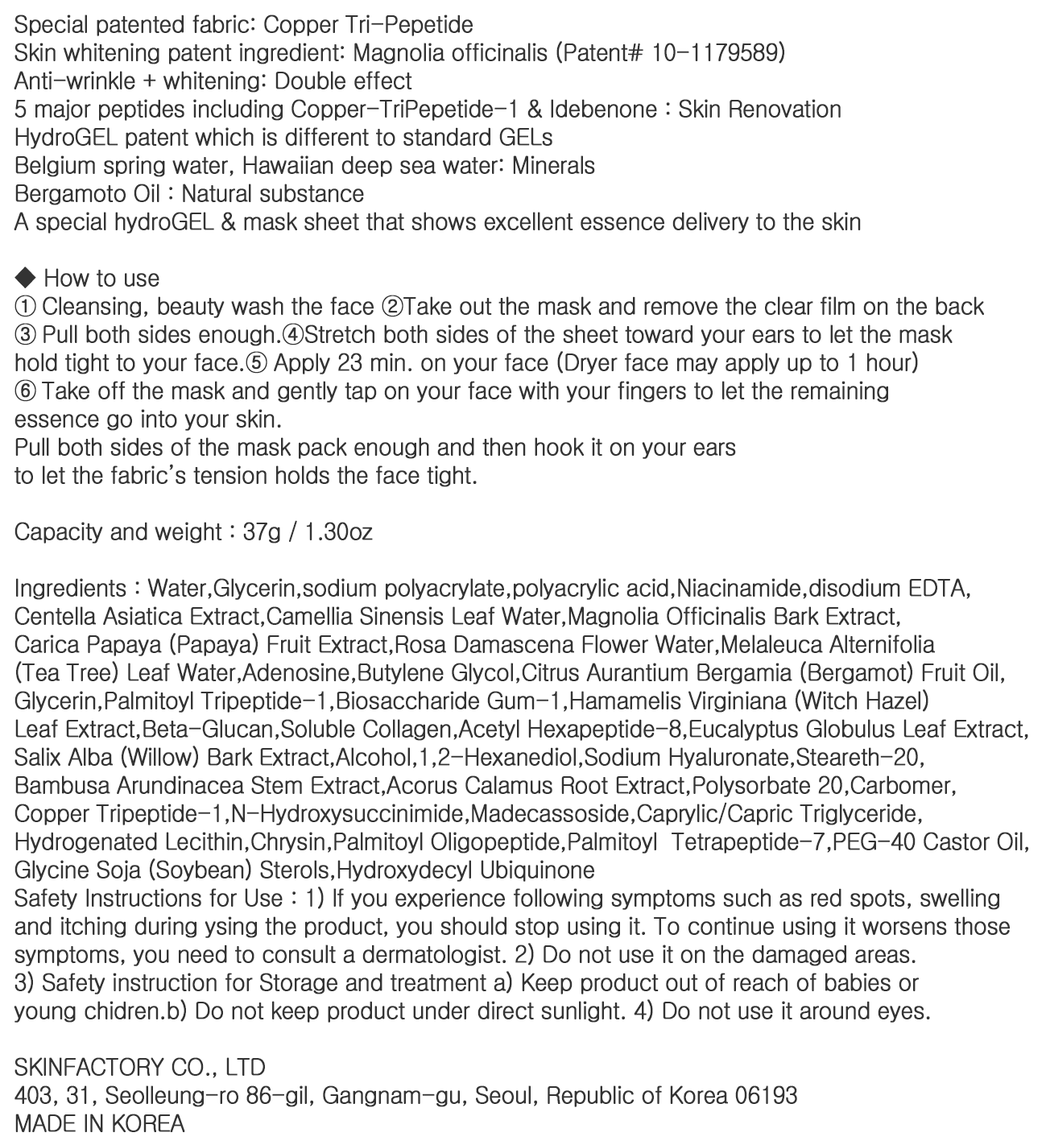
<style>
.page{position:relative;width:1046px;height:1141px;background:#ffffff}
.page>*{position:absolute;margin:0}
.t1{font:23.5px "Gulim";letter-spacing:-0.05em;color:#333333;font-weight:bold;scale:0.97 1}
</style>
<div class="page">
<p class="t1" style="left:14px;top:14px;width:1014px;height:1118px">Special patented fabric: Copper Tri-Pepetide<br>Skin whitening patent ingredient: Magnolia officinalis (Patent# 10-1179589)<br>Anti-wrinkle + whitening: Double effect<br>5 major peptides including Copper-TriPepetide-1 &amp; Idebenone : Skin Renovation <br>HydroGEL patent which is different to standard GELs <br>Belgium spring water, Hawaiian deep sea water: Minerals<br>Bergamoto Oil : Natural substance<br>A special hydroGEL &amp; mask sheet that shows excellent essence delivery to the skin<br><br>◆ How to use<br>① Cleansing, beauty wash the face ②Take out the mask and remove the clear film on the back<br>③ Pull both sides enough.④Stretch both sides of the sheet toward your ears to let the mask <br>hold tight to your face.⑤ Apply 23 min. on your face (Dryer face may apply up to 1 hour)<br>⑥ Take off the mask and gently tap on your face with your fingers to let the remaining <br>essence go into your skin. <br>Pull both sides of the mask pack enough and then hook it on your ears <br>to let the fabric’s tension holds the face tight.<br><br>Capacity and weight : 37g / 1.30oz<br><br>Ingredients : Water,Glycerin,sodium polyacrylate,polyacrylic acid,Niacinamide,disodium EDTA,<br>Centella Asiatica Extract,Camellia Sinensis Leaf Water,Magnolia Officinalis Bark Extract,<br>Carica Papaya (Papaya) Fruit Extract,Rosa Damascena Flower Water,Melaleuca Alternifolia <br>(Tea Tree) Leaf Water,Adenosine,Butylene Glycol,Citrus Aurantium Bergamia (Bergamot) Fruit Oil,<br>Glycerin,Palmitoyl Tripeptide-1,Biosaccharide Gum-1,Hamamelis Virginiana (Witch Hazel) <br>Leaf Extract,Beta-Glucan,Soluble Collagen,Acetyl Hexapeptide-8,Eucalyptus Globulus Leaf Extract,<br>Salix Alba (Willow) Bark Extract,Alcohol,1,2-Hexanediol,Sodium Hyaluronate,Steareth-20,<br>Bambusa Arundinacea Stem Extract,Acorus Calamus Root Extract,Polysorbate 20,Carbomer,<br>Copper Tripeptide-1,N-Hydroxysuccinimide,Madecassoside,Caprylic/Capric Triglyceride,<br>Hydrogenated Lecithin,Chrysin,Palmitoyl Oligopeptide,Palmitoyl  Tetrapeptide-7,PEG-40 Castor Oil,<br>Glycine Soja (Soybean) Sterols,Hydroxydecyl Ubiquinone<br>Safety Instructions for Use : 1) lf you experience following symptoms such as red spots, swelling <br>and itching during ysing the product, you should stop using it. To continue using it worsens those <br>symptoms, you need to consult a dermatologist. 2) Do not use it on the damaged areas.  <br>3) Safety instruction for Storage and treatment a) Keep product out of reach of babies or <br>young chidren.b) Do not keep product under direct sunlight. 4) Do not use it around eyes. <br><br>SKINFACTORY CO., LTD<br>403, 31, Seolleung-ro 86-gil, Gangnam-gu, Seoul, Republic of Korea 06193<br>MADE IN KOREA</p>
</div>
